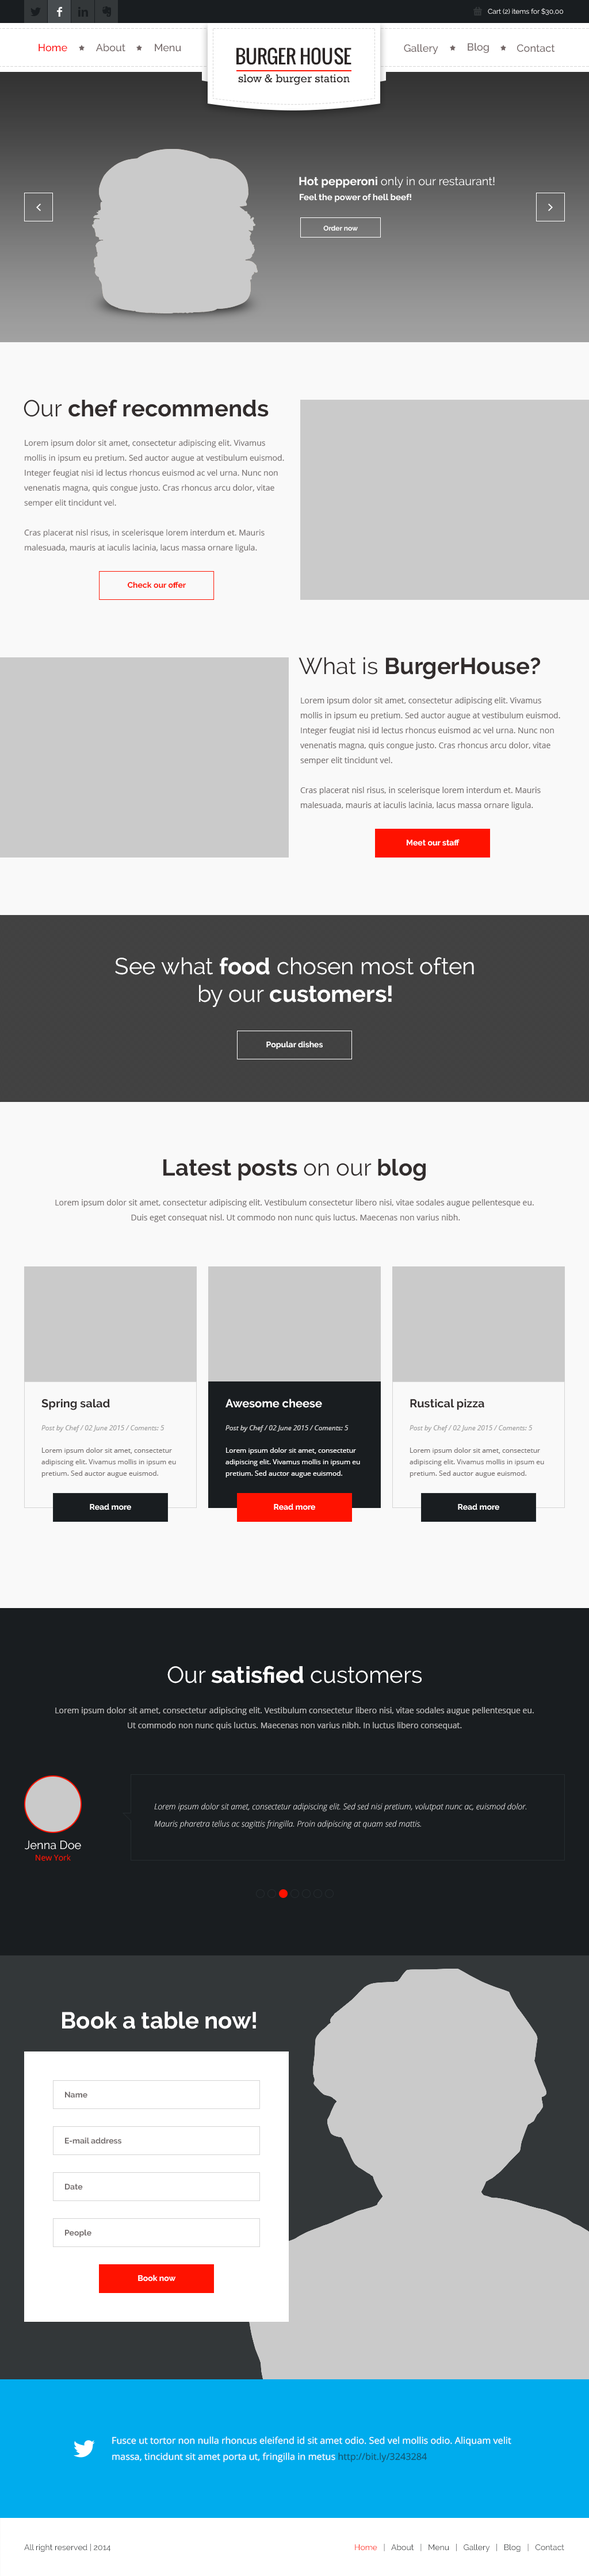
<style>
.page{position:relative;width:589px;height:2576px;background:#f9f9f9}
.page>*{position:absolute;margin:0}
.t1{font:6.9px "Raleway-Regular";color:#ffffff}
.t2{font:10.4px "Raleway-Medium";color:#fe0000}
.t3{font:10.4px "Raleway-Medium";color:#726666}
.t4{font:19px "Oswald";color:#2a2525}
.t5{font:11.5px "Rockwell";color:#2a2525}
.t6{font:11.5px "Raleway-Regular";color:#ffffff}
.t7{font:11.5px "Raleway-Bold";color:#ffffff}
.t8{font:8.6px "Raleway-Bold";color:#ffffff}
.t9{font:6.9px "Raleway-Bold";color:#ffffff}
.t10{font:23px "Raleway-Bold";color:#322d2d}
.t11{font:23px "Raleway";color:#322d2d}
.t12{font:8.1px/15px "OpenSans";color:#767070}
.t13{font:8.1px "Raleway-Bold";color:#ff1200}
.t14{font:23px "Raleway-Regular";color:#322d2d}
.t15{font:8.1px "Raleway-Bold";color:#fefefe}
.t16{font:23px "Raleway";color:#ffffff}
.t17{font:23px "Raleway-Bold";color:#ffffff}
.t18{font:8.1px "Raleway-Bold";color:#ffffff}
.t19{font:11.5px "Raleway-Bold";color:#322d2d}
.t20{font:6.9px "OpenSans-Italic";color:#9e9e9e}
.t21{font:6.9px "OpenSans-Italic";color:#d3d3d3}
.t22{font:6.9px/11.5px "OpenSans";color:#767070}
.t23{font:6.9px/11.5px "OpenSans";color:#ffffff}
.t24{font:8.1px/15px "OpenSans";color:#bdbcbc}
.t25{font:8.1px/17.3px "OpenSansLight-Italic";color:#ffffff}
.t26{font:11.5px "Raleway";color:#ffffff}
.t27{font:8.1px "OpenSans";color:#ff1200}
.t28{font:23px "Raleway-Bold";color:#fffefe}
.t29{font:8.1px "Raleway-Bold";color:#767070}
.t30{font:9.2px/16.1px "OpenSans";color:#ffffff}
.t31{font:9.2px/16.1px "OpenSans";color:#13546d}
.t32{font:8.1px "Raleway";color:#333739}
.t33{font:8.1px "Raleway";color:#ff1200}
</style>
<div class="page">
<p class="t1" style="left:488px;top:8px;width:75px;height:7px">Cart (2) items for $30,00</p>
<p class="t2" style="left:39px;top:44px;width:28px;height:8px">Home</p>
<p class="t3" style="left:96px;top:43px;width:29px;height:9px">About</p>
<p class="t3" style="left:155px;top:44px;width:26px;height:8px">Menu</p>
<p class="t4" style="left:236px;top:47px;width:115px;height:18px">BURGER HOUSE</p>
<p class="t3" style="left:404px;top:44px;width:34px;height:10px">Gallery</p>
<p class="t3" style="left:468px;top:43px;width:21px;height:10px">Blog</p>
<p class="t3" style="left:517px;top:44px;width:38px;height:8px">Contact</p>
<p class="t5" style="left:238px;top:74px;width:112px;height:11px">slow &amp; burger station</p>
<p class="t6" style="left:299px;top:177px;width:196px;height:11px"><span class="t7">Hot pepperoni</span> only in our restaurant!</p>
<p class="t8" style="left:300px;top:194px;width:111px;height:8px">Feel the power of hell beef!</p>
<p class="t9" style="left:323px;top:225px;width:35px;height:6px">Order now</p>
<p class="t10" style="left:24px;top:399px;width:245px;height:18px"><span class="t11">Our </span>chef recommends</p>
<p class="t12" style="left:24px;top:439px;width:260px;height:114px">Lorem ipsum dolor sit amet, consectetur adipiscing elit. Vivamus mollis in ipsum eu pretium. Sed auctor augue at vestibulum euismod. Integer feugiat nisi id lectus rhoncus euismod ac vel urna. Nunc non venenatis magna, quis congue justo. Cras rhoncus arcu dolor, vitae semper elit tincidunt vel.<br><br>Cras placerat nisl risus, in scelerisque lorem interdum et. Mauris malesuada, mauris at iaculis lacinia, lacus massa ornare ligula.</p>
<p class="t13" style="left:128px;top:581px;width:58px;height:7px">Check our offer</p>
<p class="t10" style="left:298px;top:657px;width:242px;height:22px"><span class="t14">What is </span>BurgerHouse?</p>
<p class="t12" style="left:300px;top:697px;width:260px;height:113px">Lorem ipsum dolor sit amet, consectetur adipiscing elit. Vivamus mollis in ipsum eu pretium. Sed auctor augue at vestibulum euismod. Integer feugiat nisi id lectus rhoncus euismod ac vel urna. Nunc non venenatis magna, quis congue justo. Cras rhoncus arcu dolor, vitae semper elit tincidunt vel.<br><br>Cras placerat nisl risus, in scelerisque lorem interdum et. Mauris malesuada, mauris at iaculis lacinia, lacus massa ornare ligula.</p>
<p class="t15" style="left:407px;top:839px;width:53px;height:7px">Meet our staff</p>
<p class="t16" style="left:115px;top:957px;width:359px;height:50px;text-align:center">See what <span class="t17">food</span> chosen most often<br>by our <span class="t17">customers!</span></p>
<p class="t18" style="left:266px;top:1041px;width:57px;height:8px">Popular dishes</p>
<p class="t10" style="left:163px;top:1159px;width:263px;height:22px">Latest posts <span class="t11">on our</span> blog</p>
<p class="t12" style="left:55px;top:1199px;width:479px;height:23px;text-align:center">Lorem ipsum dolor sit amet, consectetur adipiscing elit. Vestibulum consectetur libero nisi, vitae sodales augue pellentesque eu.<br> Duis eget consequat nisl. Ut commodo non nunc quis luctus. Maecenas non varius nibh.</p>
<p class="t19" style="left:41px;top:1399px;width:69px;height:11px">Spring salad</p>
<p class="t7" style="left:225px;top:1399px;width:97px;height:9px">Awesome cheese</p>
<p class="t19" style="left:410px;top:1399px;width:74px;height:11px">Rustical pizza</p>
<p class="t20" style="left:41px;top:1425px;width:123px;height:7px">Post by Chef / 02 June 2015 / Coments: 5</p>
<p class="t21" style="left:225px;top:1425px;width:124px;height:7px">Post by Chef / 02 June 2015 / Coments: 5</p>
<p class="t20" style="left:409px;top:1425px;width:124px;height:7px">Post by Chef / 02 June 2015 / Coments: 5</p>
<p class="t22" style="left:41px;top:1448px;width:135px;height:30px">Lorem ipsum dolor sit amet, consectetur adipiscing elit. Vivamus mollis in ipsum eu pretium. Sed auctor augue euismod.</p>
<p class="t23" style="left:225px;top:1448px;width:135px;height:30px">Lorem ipsum dolor sit amet, consectetur adipiscing elit. Vivamus mollis in ipsum eu pretium. Sed auctor augue euismod.</p>
<p class="t22" style="left:409px;top:1448px;width:135px;height:30px">Lorem ipsum dolor sit amet, consectetur adipiscing elit. Vivamus mollis in ipsum eu pretium. Sed auctor augue euismod.</p>
<p class="t15" style="left:90px;top:1503px;width:41px;height:7px">Read more</p>
<p class="t15" style="left:274px;top:1503px;width:41px;height:7px">Read more</p>
<p class="t15" style="left:458px;top:1503px;width:41px;height:7px">Read more</p>
<p class="t17" style="left:167px;top:1666px;width:255px;height:17px"><span class="t16">Our </span>satisfied<span class="t16"> customers</span></p>
<p class="t24" style="left:55px;top:1707px;width:479px;height:23px;text-align:center">Lorem ipsum dolor sit amet, consectetur adipiscing elit. Vestibulum consectetur libero nisi, vitae sodales augue pellentesque eu.<br>Ut commodo non nunc quis luctus. Maecenas non varius nibh. In luctus libero consequat.</p>
<p class="t25" style="left:154px;top:1803px;width:372px;height:26px">Lorem ipsum dolor sit amet, consectetur adipiscing elit. Sed sed nisi pretium, volutpat nunc ac, euismod dolor. Mauris pharetra tellus ac sagittis fringilla. Proin adipiscing at quam sed mattis.</p>
<p class="t26" style="left:25px;top:1840px;width:56px;height:10px">Jenna Doe</p>
<p class="t27" style="left:36px;top:1854px;width:35px;height:7px">New York</p>
<p class="t28" style="left:62px;top:2011px;width:194px;height:18px">Book a table now!</p>
<p class="t29" style="left:65px;top:2092px;width:22px;height:6px">Name</p>
<p class="t29" style="left:65px;top:2137px;width:56px;height:7px">E-mail address</p>
<p class="t29" style="left:65px;top:2184px;width:18px;height:6px">Date</p>
<p class="t29" style="left:65px;top:2229px;width:26px;height:8px">People</p>
<p class="t18" style="left:138px;top:2275px;width:38px;height:7px">Book now</p>
<p class="t30" style="left:112px;top:2436px;width:399px;height:26px">Fusce ut tortor non nulla rhoncus eleifend id sit amet odio. Sed vel mollis odio. Aliquam velit massa, tincidunt sit amet porta ut, fringilla in metus <span class="t31">http://bit.ly/3243284</span></p>
<p class="t32" style="left:24px;top:2544px;width:86px;height:8px">All right reserved | 2014</p>
<p class="t32" style="left:355px;top:2544px;width:209px;height:8px"><span class="t33">Home</span>   |   About   |   Menu   |   Gallery   |   Blog   |   Contact</p>
</div>
